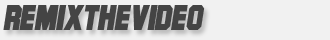
<style>
.page{position:relative;width:330px;height:40px;background:#f1f1f1}
.page>*{position:absolute;margin:0}
.t1{font:27.5px "Font";color:#444444;font-style:italic;scale:0.88 1}
</style>
<div class="page">
<p class="t1" style="left:3px;top:5px;width:202px;height:25px">remixthevideo</p>
</div>
